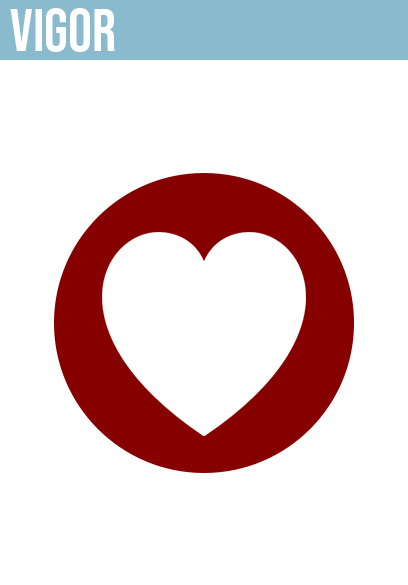
<style>
.page{position:relative;width:408px;height:585px;background:#ffffff}
.page>*{position:absolute;margin:0}
.t1{font:60px "BebasNeue-Regular";color:#ffffff}
</style>
<div class="page">
<p class="t1" style="left:10px;top:8px;width:105px;height:44px">vigor</p>
</div>
